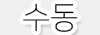
<style>
.page{position:relative;width:100px;height:35px;background:#f0f0f0}
.page>*{position:absolute;margin:0}
.t1{font:31px "NanumSquareL";color:#000000}
</style>
<div class="page">
<p class="t1" style="left:23px;top:3px;width:55px;height:29px">수동</p>
</div>
